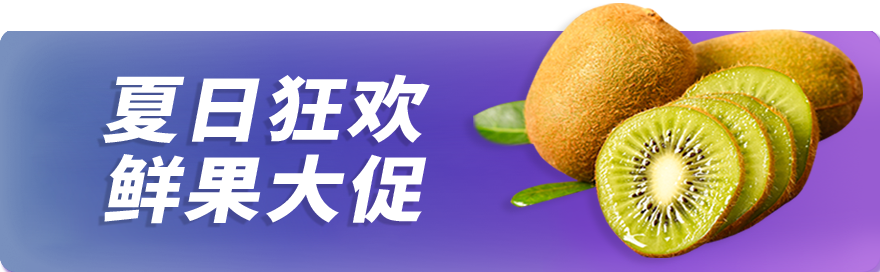
<style>
.page{position:relative;width:880px;height:272px}
.page>*{position:absolute;margin:0}
.t1{font:71.9px/80px "SourceHanSansSC-Heavy";letter-spacing:0.05em;color:#ffffff;font-style:italic;scale:1.07 1}
</style>
<div class="page">
<p class="t1" style="left:102px;top:74px;width:328px;height:150px;text-align:center">夏日狂欢<br>鲜果大促</p>
</div>
